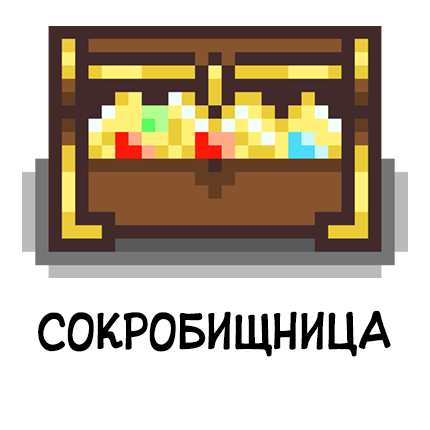
<style>
.page{position:relative;width:430px;height:430px;background:#ffffff}
.page>*{position:absolute;margin:0}
.t1{font:48px "V_10CentComics";color:#000000;text-transform:uppercase;scale:0.95 1}
</style>
<div class="page">
<p class="t1" style="left:38px;top:310px;width:353px;height:47px">Сокровищница</p>
</div>
